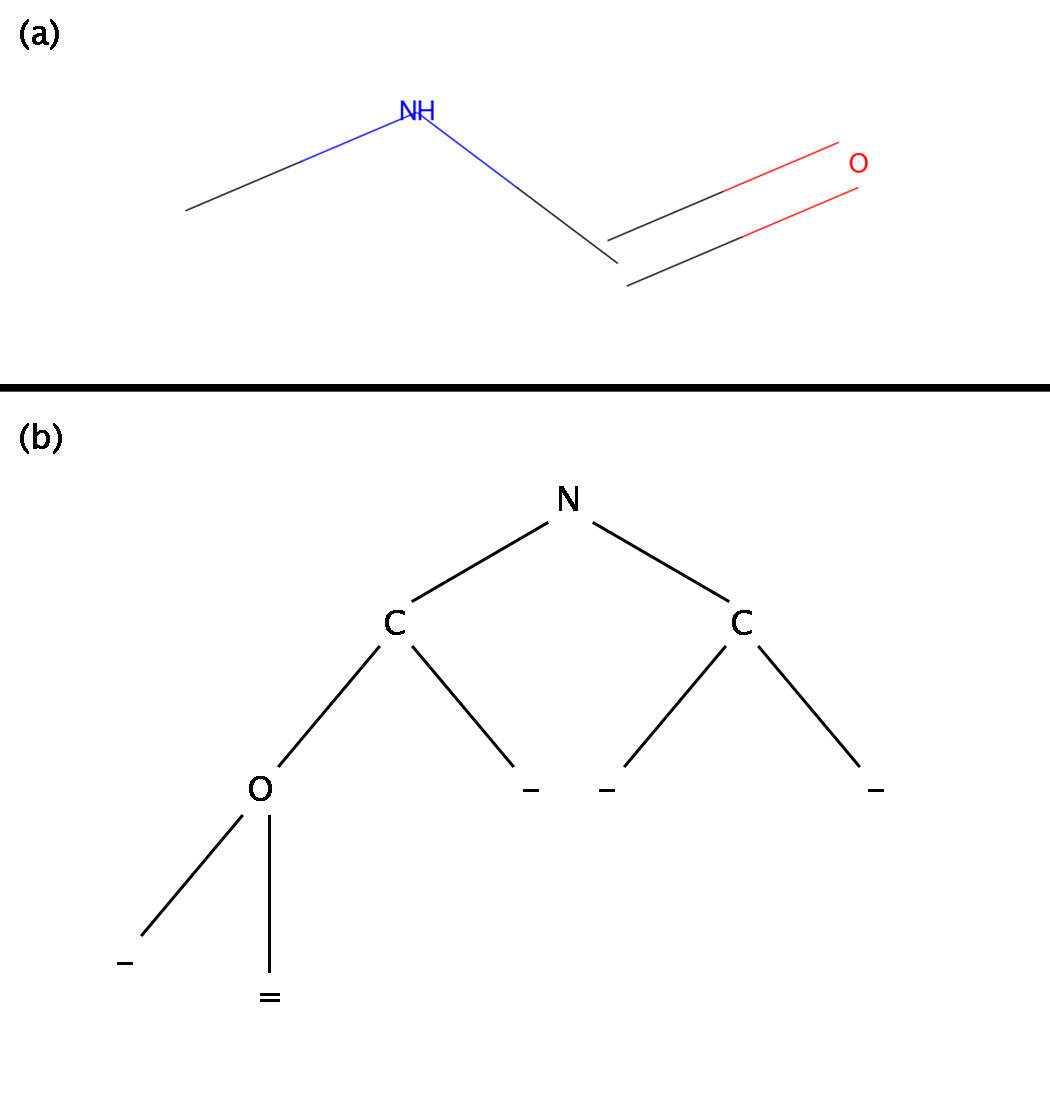
<style>
.page{position:relative;width:1050px;height:1100px;background:#ffffff}
.page>*{position:absolute;margin:0}
.t1{font:12px "LucidaSansUnicode";color:#000000;font-weight:bold}
</style>
<div class="page">
<p class="t1" style="left:20px;top:19px;width:39px;height:31px;text-align:center">(a)</p>
<p class="t1" style="left:20px;top:423px;width:42px;height:31px;text-align:center">(b)</p>
<p class="t1" style="left:559px;top:486px;width:19px;height:25px;text-align:center">N</p>
<p class="t1" style="left:385px;top:610px;width:20px;height:25px;text-align:center">C</p>
<p class="t1" style="left:732px;top:610px;width:20px;height:25px;text-align:center">C</p>
<p class="t1" style="left:249px;top:776px;width:23px;height:25px;text-align:center">O</p>
<p class="t1" style="left:260px;top:993px;width:20px;height:9px">=</p>
</div>
